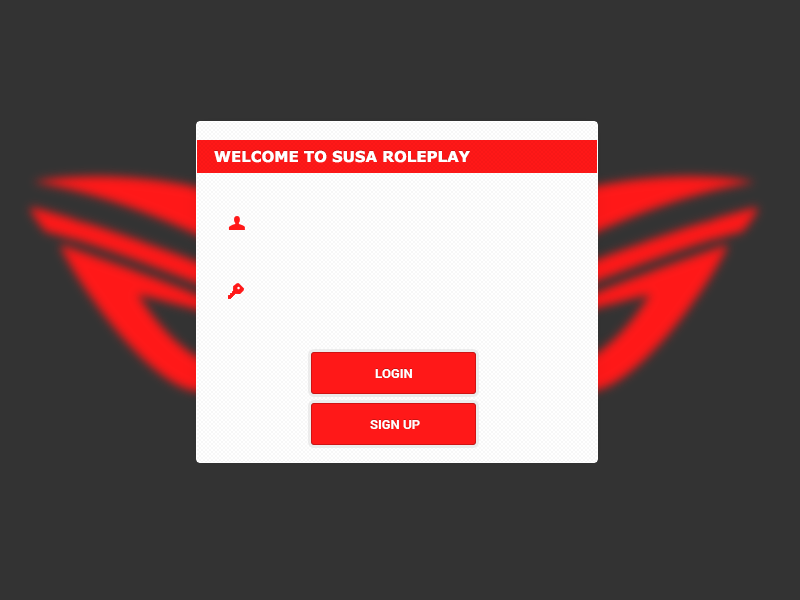
<style>
.page{position:relative;width:800px;height:600px;background:#333333}
.page>*{position:absolute;margin:0}
.t1{font:15px "Verdana-Bold";color:#ffffff;text-transform:uppercase}
.t2{font:13px "Roboto-Bold";color:#ffffff;text-transform:uppercase}
</style>
<div class="page">
<p class="t1" style="left:214px;top:150px;width:256px;height:13px">Welcome to susa roleplay</p>
<p class="t2" style="left:375px;top:369px;width:37px;height:9px">Login</p>
<p class="t2" style="left:370px;top:420px;width:50px;height:9px">SIGN UP</p>
</div>
